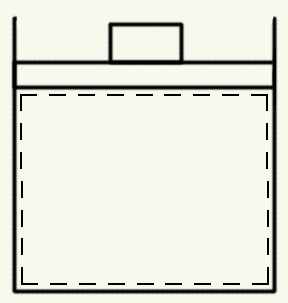
<style>
.page{position:relative;width:288px;height:303px;background:#f9f8ec}
.page>*{position:absolute;margin:0}
.t1{font:35px "MyriadPro-BoldCond";color:#000000;scale:0.96 1}
.t2{font:37.5px "MyriadPro-BoldCond";color:#000000;scale:0.9 1}
</style>
<div class="page">
<p class="t1" style="left:20px;top:94px;width:248px;height:2px">_  _  _  _  _  _  _  _  _</p>
<p class="t2" style="left:20px;top:94px;width:3px;height:190px;rotate:90deg">_  _  _  _  _  _  _</p>
<p class="t2" style="left:266px;top:94px;width:3px;height:190px;rotate:90deg">_  _  _  _  _  _  _</p>
<p class="t1" style="left:21px;top:283px;width:248px;height:2px">_  _  _  _  _  _  _  _  _</p>
</div>
